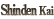
<style>
.page{position:relative;width:54px;height:19px;background:#ffffff}
.page>*{position:absolute;margin:0}
.t1{font:14px "RyuminPro-ExBold";letter-spacing:-0.105em;color:#4a3f32;font-weight:bold;scale:0.8 1}
.t2{font:12px "RyuminPro-ExBold";letter-spacing:-0.105em;color:#4a3f32;font-weight:bold;scale:0.8 1}
</style>
<div class="page">
<p class="t1" style="left:0px;top:4px;width:54px;height:12px">Shinden <span class="t2">Kai</span></p>
</div>
